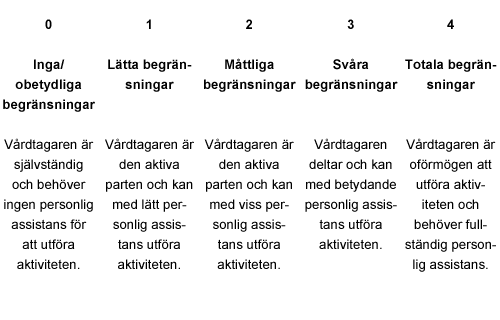
<style>
.page{position:relative;width:500px;height:320px;background:#ffffff}
.page>*{position:absolute;margin:0}
.t1{font:13.3px/20px "ArialMT";color:#000000}
.t2{font:13.3px/20px "Arial-BoldMT";color:#000000}
</style>
<div class="page">
<p class="t1" style="left:3px;top:19px;width:92px;height:250px;text-align:center"><span class="t2">0<br><br>Inga/<br>obetydliga begränsningar<br><br></span>Vårdtagaren är självständig och behöver ingen personlig assistans för att utföra <br>aktiviteten.</p>
<p class="t1" style="left:105px;top:19px;width:89px;height:250px;text-align:center"><span class="t2">1<br><br>Lätta begränsningar<br><br><br></span>Vårdtagaren är den aktiva parten och kan med lätt personlig assistans utföra aktiviteten.</p>
<p class="t1" style="left:204px;top:19px;width:92px;height:250px;text-align:center"><span class="t2">2<br><br>Måttliga begränsningar<br><br><br></span>Vårdtagaren är den aktiva parten och kan med viss personlig assistans utföra aktiviteten.</p>
<p class="t1" style="left:305px;top:19px;width:93px;height:230px;text-align:center"><span class="t2">3<br><br>Svåra <br>begränsningar<br><br><br></span>Vårdtagaren deltar och kan med betydande personlig assistans utföra aktiviteten.</p>
<p class="t1" style="left:405px;top:19px;width:92px;height:253px;text-align:center"><span class="t2">4<br><br>Totala begränsningar<br><br><br></span>Vårdtagaren är oförmögen att utföra aktiviteten och behöver fullständig personlig assistans.</p>
</div>
